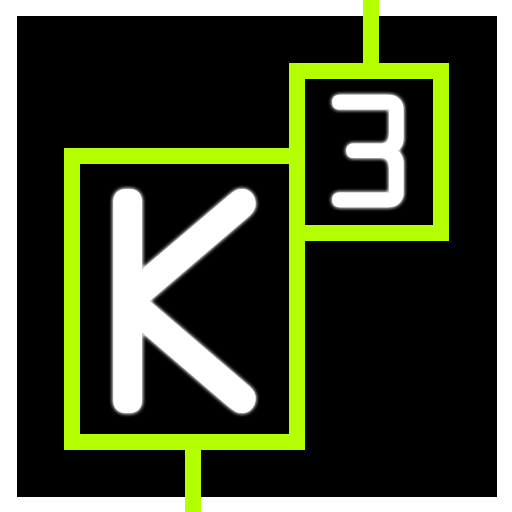
<style>
.page{position:relative;width:512px;height:512px;background:#000000}
.page>*{position:absolute;margin:0}
.t1{font:144px "OCRAStd";color:#ffffff}
.t2{font:288px "OCRAStd";color:#ffffff}
</style>
<div class="page">
<p class="t1" style="left:332px;top:94px;width:72px;height:114px">3</p>
<p class="t2" style="left:113px;top:189px;width:143px;height:224px">K</p>
</div>
